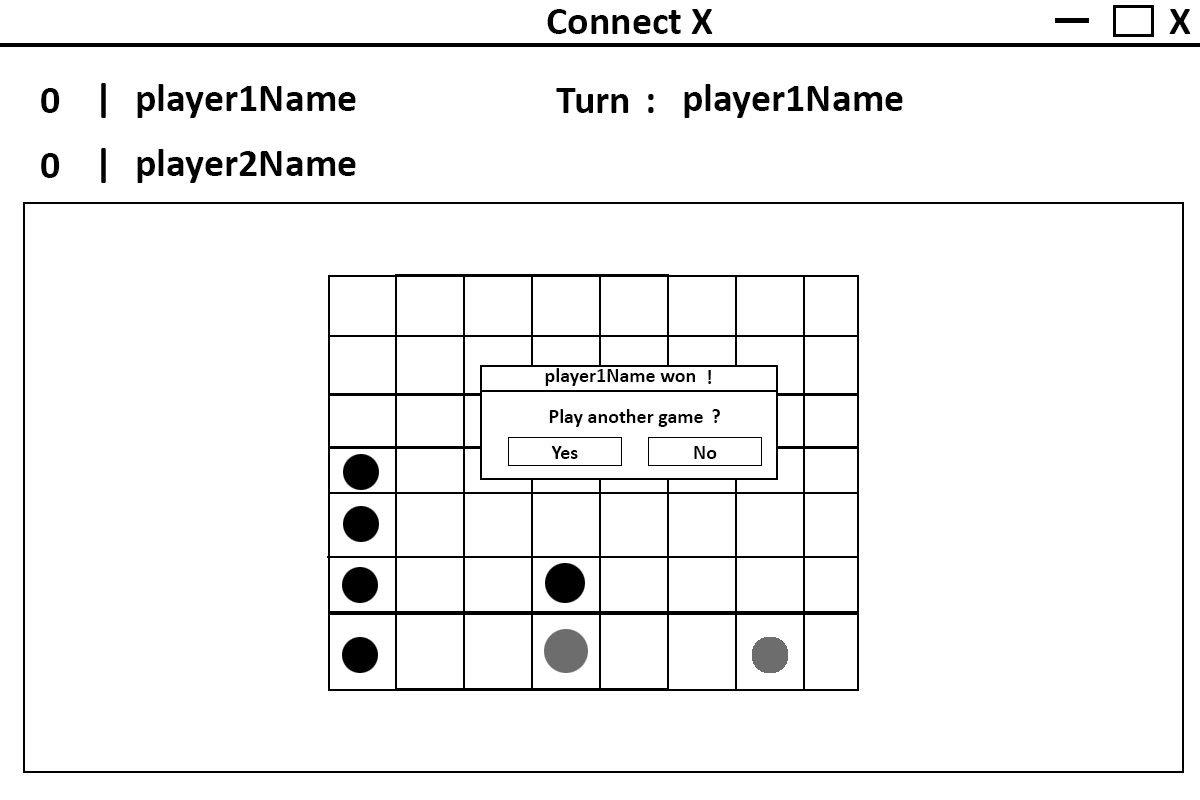
<style>
.page{position:relative;width:1200px;height:800px;background:#ffffff}
.page>*{position:absolute;margin:0}
.t1{font:40px "Calibri-Bold";color:#000000}
.t2{font:20px "Calibri-Bold";color:#000000}
</style>
<div class="page">
<p class="t1" style="left:547px;top:9px;width:166px;height:25px">Connect X</p>
<p class="t1" style="left:1169px;top:9px;width:22px;height:25px">X</p>
<p class="t1" style="left:41px;top:88px;width:19px;height:25px">0</p>
<p class="t1" style="left:101px;top:83px;width:5px;height:35px">|</p>
<p class="t1" style="left:137px;top:84px;width:219px;height:34px">player1Name</p>
<p class="t1" style="left:556px;top:88px;width:73px;height:25px">Turn</p>
<p class="t1" style="left:684px;top:84px;width:219px;height:34px">player1Name</p>
<p class="t1" style="left:648px;top:94px;width:6px;height:19px">:</p>
<p class="t1" style="left:101px;top:148px;width:5px;height:35px">|</p>
<p class="t1" style="left:137px;top:149px;width:219px;height:34px">player2Name</p>
<p class="t1" style="left:41px;top:153px;width:19px;height:25px">0</p>
<p class="t2" style="left:545px;top:368px;width:150px;height:18px">player1Name won</p>
<p class="t2" style="left:708px;top:370px;width:3px;height:14px">!</p>
<p class="t2" style="left:549px;top:409px;width:154px;height:18px">Play another game</p>
<p class="t2" style="left:712px;top:409px;width:8px;height:14px">?</p>
<p class="t2" style="left:551px;top:446px;width:27px;height:13px">Yes</p>
<p class="t2" style="left:694px;top:446px;width:23px;height:13px">No</p>
</div>
